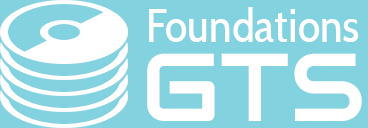
<style>
.page{position:relative;width:368px;height:128px;background:#82d2e0}
.page>*{position:absolute;margin:0}
.t1{font:46.7px "CabinCondensed";color:#ffffff}
.t2{font:96px "Audiowide-Regular";color:#ffffff}
</style>
<div class="page">
<p class="t1" style="left:149px;top:7px;width:210px;height:35px">Foundations</p>
<p class="t2" style="left:147px;top:53px;width:215px;height:68px">GTS</p>
</div>
